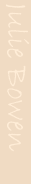
<style>
.page{position:relative;width:31px;height:184px;background:#f0dbc3}
.page>*{position:absolute;margin:0}
.t1{font:31.2px "BradleyHandITC";color:#ffedd7}
</style>
<div class="page">
<p class="t1" style="left:6px;top:4px;width:24px;height:148px;rotate:90deg">Julie Bowen</p>
</div>
